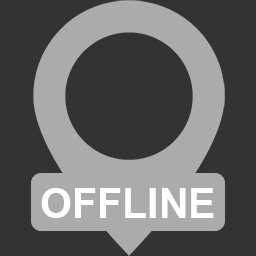
<style>
.page{position:relative;width:256px;height:256px;background:#333333}
.page>*{position:absolute;margin:0}
.t1{font:40.9px "Arial-BoldMT";color:#ffffff}
</style>
<div class="page">
<p class="t1" style="left:41px;top:188px;width:173px;height:30px">OFFLINE</p>
</div>
